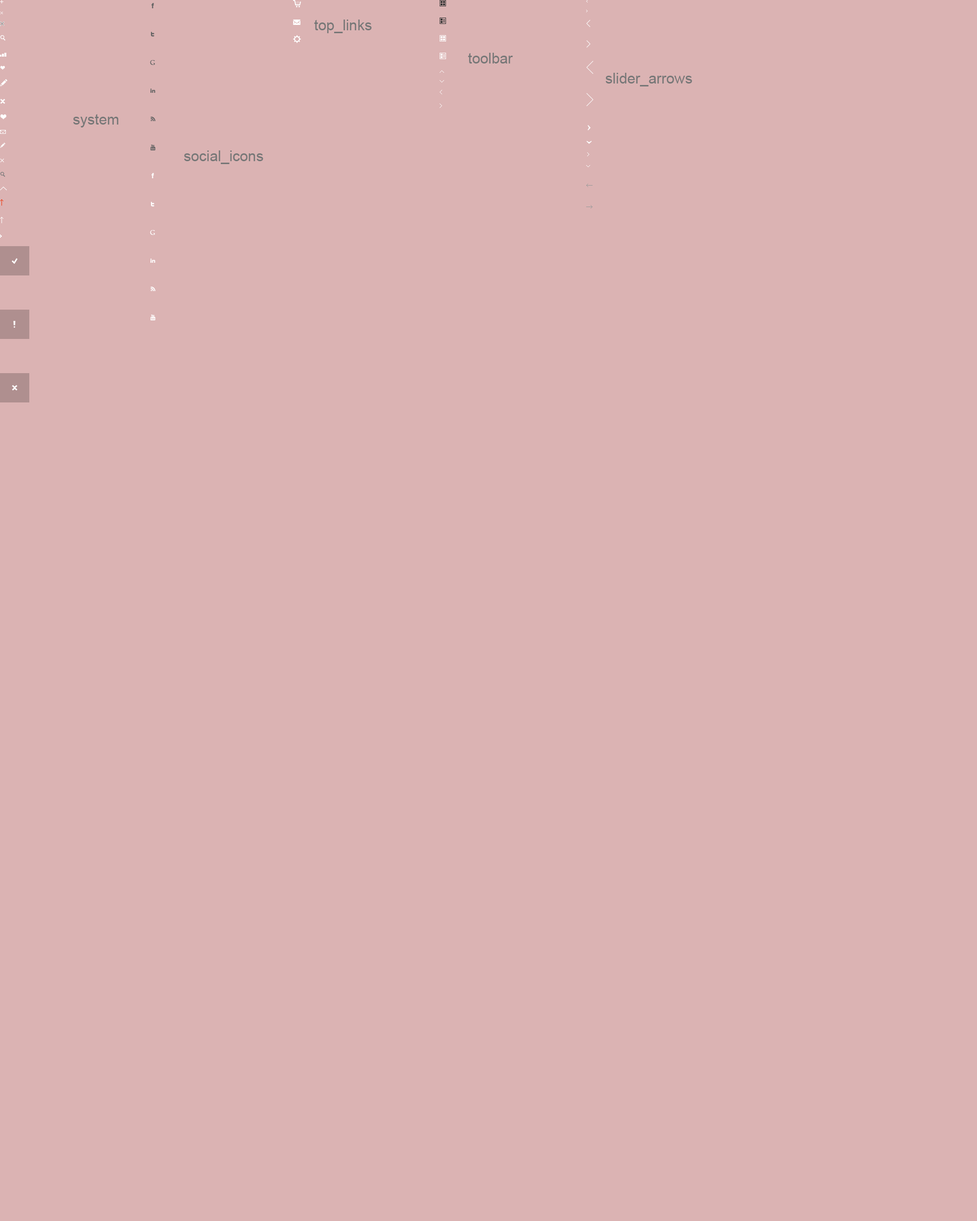
<style>
.page{position:relative;width:977px;height:1221px;background:#dbb3b3}
.page>*{position:absolute;margin:0}
.t1{font:14.7px "ArialMT";color:#777777}
</style>
<div class="page">
<p class="t1" style="left:314px;top:20px;width:58px;height:13px">top_links</p>
<p class="t1" style="left:468px;top:53px;width:45px;height:10px">toolbar</p>
<p class="t1" style="left:606px;top:73px;width:86px;height:13px">slider_arrows</p>
<p class="t1" style="left:73px;top:114px;width:46px;height:13px">system</p>
<p class="t1" style="left:184px;top:150px;width:79px;height:14px">social_icons</p>
</div>
